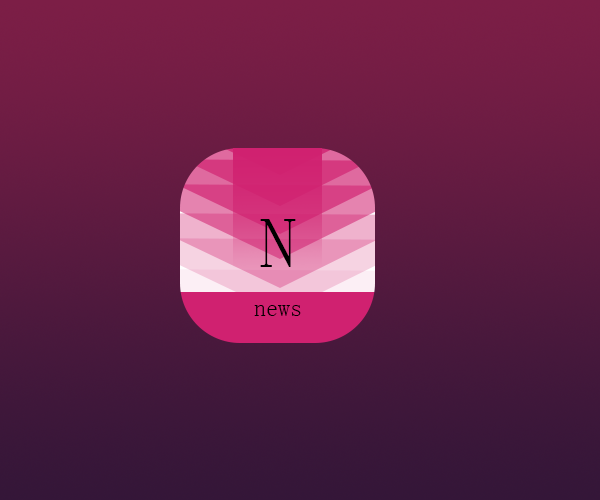
<style>
.page{position:relative;width:600px;height:500px}
.page>*{position:absolute;margin:0}
.t1{font:72px "SimSun";color:#000000}
.t2{font:24px "SimSun";color:#000000}
</style>
<div class="page">
<p class="t1" style="left:260px;top:219px;width:36px;height:48px">N</p>
<p class="t2" style="left:254px;top:305px;width:47px;height:11px">news</p>
</div>
